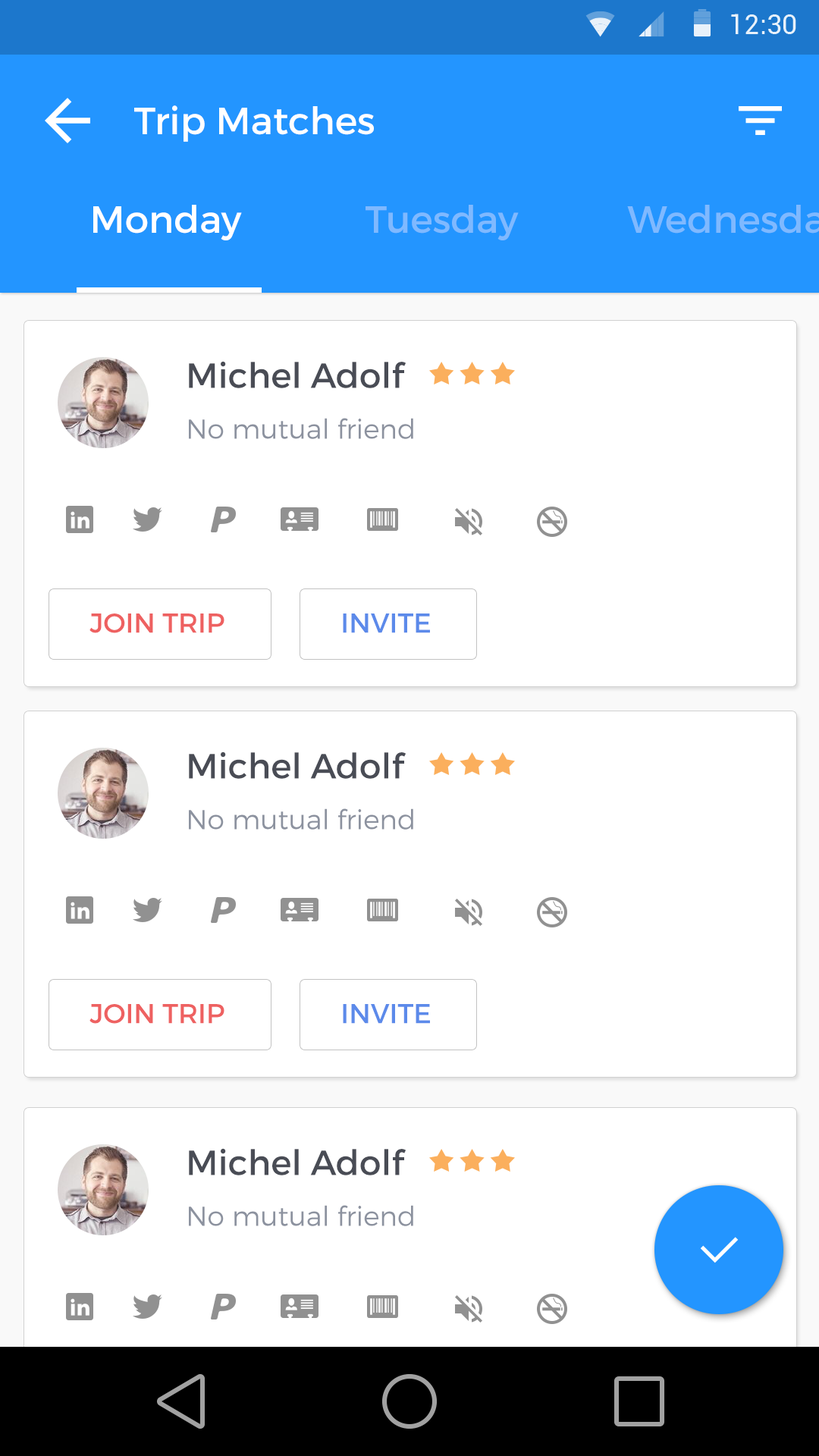
<style>
.page{position:relative;width:819px;height:1456px;background:#ffffff}
.page>*{position:absolute;margin:0}
.t1{font:37.9px "Montserrat-Regular";color:#ffffff}
.t2{font:37.9px "Montserrat-Regular";color:#7fb9ff}
.t3{font:34.9px "Montserrat-Regular";color:#494c55}
.t4{font:27.3px "Montserrat-Light";color:#8c929f}
.t5{font:27.3px "Montserrat-Regular";color:#ee6161}
.t6{font:27.3px "Montserrat-Regular";color:#5c8aea}
</style>
<div class="page">
<p class="t1" style="left:134px;top:105px;width:240px;height:37px">Trip Matches</p>
<p class="t1" style="left:93px;top:205px;width:149px;height:35px">Monday</p>
<p class="t2" style="left:366px;top:205px;width:153px;height:35px">Tuesday</p>
<p class="t3" style="left:189px;top:361px;width:217px;height:27px">Michel Adolf</p>
<p class="t4" style="left:189px;top:418px;width:224px;height:21px">No mutual friend</p>
<p class="t5" style="left:89px;top:613px;width:135px;height:20px">JOIN TRIP</p>
<p class="t6" style="left:343px;top:613px;width:87px;height:20px">INVITE</p>
<p class="t3" style="left:189px;top:751px;width:217px;height:28px">Michel Adolf</p>
<p class="t4" style="left:189px;top:808px;width:224px;height:22px">No mutual friend</p>
<p class="t5" style="left:89px;top:1004px;width:135px;height:20px">JOIN TRIP</p>
<p class="t6" style="left:343px;top:1004px;width:87px;height:20px">INVITE</p>
<p class="t3" style="left:189px;top:1148px;width:217px;height:27px">Michel Adolf</p>
<p class="t4" style="left:189px;top:1205px;width:224px;height:21px">No mutual friend</p>
</div>
